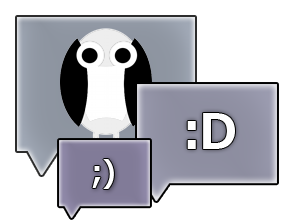
<style>
.page{position:relative;width:294px;height:221px;background:#ffffff}
.page>*{position:absolute;margin:0}
.t1{font:48px "MeiryoUI-Bold";letter-spacing:-0.05em;color:#ffffff}
.t2{font:30px "MeiryoUI-Bold";letter-spacing:-0.05em;color:#ffffff}
</style>
<div class="page">
<p class="t1" style="left:187px;top:113px;width:48px;height:36px">:D</p>
<p class="t2" style="left:92px;top:159px;width:22px;height:30px">;)</p>
</div>
